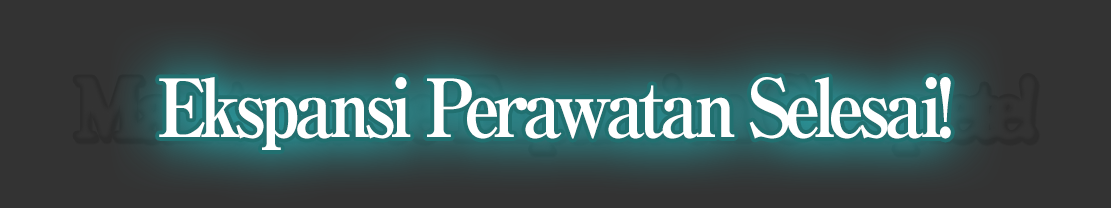
<style>
.page{position:relative;width:1111px;height:208px;background:#333333}
.page>*{position:absolute;margin:0}
.t1{font:80px "RyuminPro-ExBold";letter-spacing:-0.08em;color:#ffffff;scale:0.9 1}
</style>
<div class="page">
<p class="t1" style="left:159px;top:77px;width:792px;height:73px">Ekspansi Perawatan Selesai!</p>
</div>
